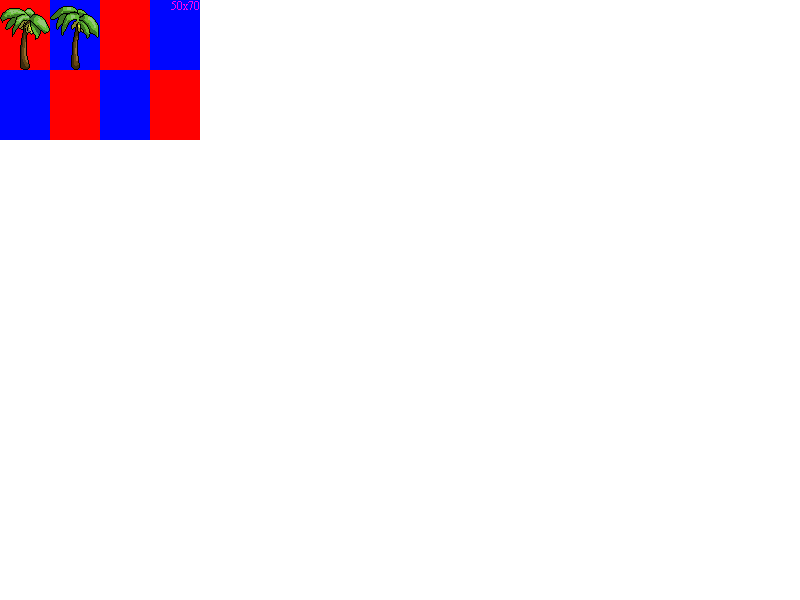
<style>
.page{position:relative;width:800px;height:600px;background:#ffffff}
.page>*{position:absolute;margin:0}
.t1{font:12px "TimesNewRomanPSMT";color:#ff00f0}
</style>
<div class="page">
<p class="t1" style="left:171px;top:1px;width:28px;height:9px">50x70</p>
</div>
